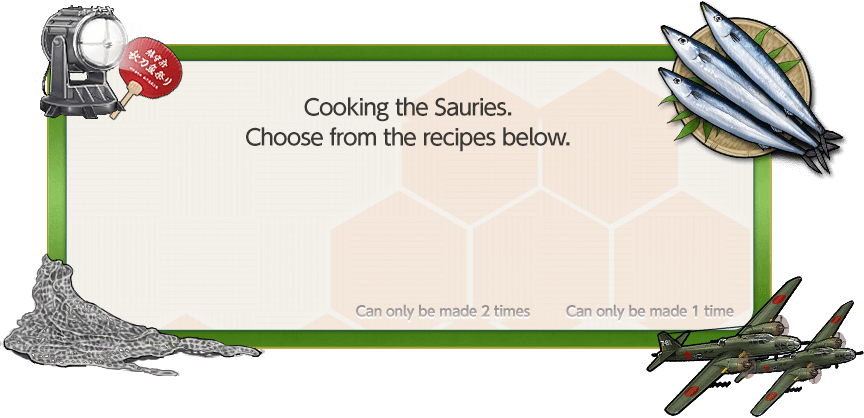
<style>
.page{position:relative;width:864px;height:418px;background:#ffffff}
.page>*{position:absolute;margin:0}
.t1{font:22px/30px "UDShinGoPro-Medium";letter-spacing:-0.04em;color:#3b3935}
.t2{font:14px "UDShinGoPro-Bold";letter-spacing:-0.04em;color:#a9a19d}
</style>
<div class="page">
<p class="t1" style="left:246px;top:97px;width:324px;height:55px;text-align:center">Cooking the Sauries.<br>Choose from the recipes below.</p>
<p class="t2" style="left:356px;top:304px;width:174px;height:17px">Can only be made 2 times</p>
<p class="t2" style="left:566px;top:304px;width:168px;height:17px">Can only be made 1 time</p>
</div>
